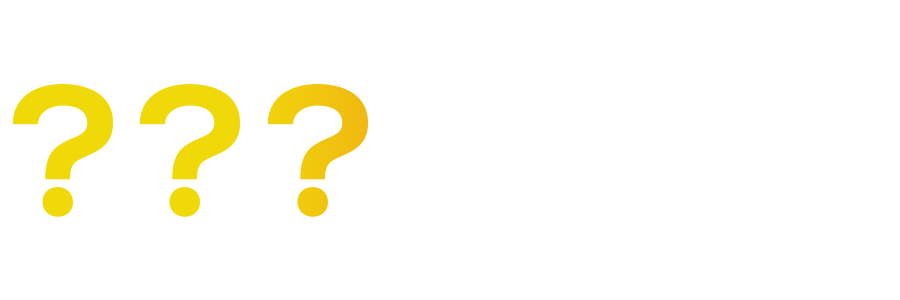
<style>
.page{position:relative;width:900px;height:300px;background:#ffffff}
.page>*{position:absolute;margin:0}
.t1{font:187.5px "NexaBold";letter-spacing:0.06em;color:#f0d909}
</style>
<div class="page">
<p class="t1" style="left:12px;top:84px;width:356px;height:133px">???</p>
</div>
